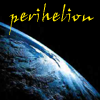
<style>
.page{position:relative;width:100px;height:100px;background:#000000}
.page>*{position:absolute;margin:0}
.t1{font:21px "JohnHandyLetPlain";color:#ffea00}
</style>
<div class="page">
<p class="t1" style="left:9px;top:3px;width:85px;height:32px">perihelion</p>
</div>
